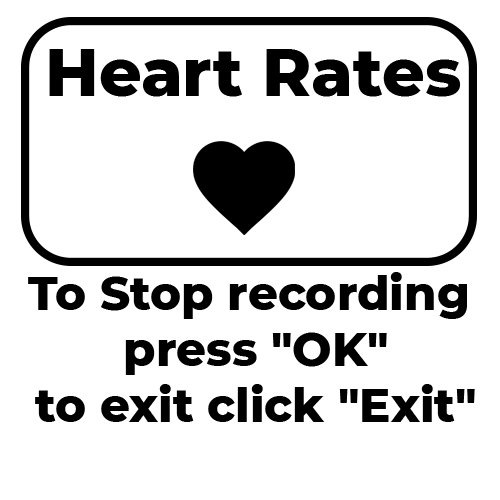
<style>
.page{position:relative;width:500px;height:500px;background:#ffffff}
.page>*{position:absolute;margin:0}
.t1{font:66.7px "Montserrat-ExtraBold";color:#000000}
.t2{font:46.7px "Montserrat-ExtraBold";color:#000000}
</style>
<div class="page">
<p class="t1" style="left:49px;top:49px;width:412px;height:48px">Heart Rates</p>
<p class="t2" style="left:28px;top:272px;width:447px;height:150px;text-align:center">To Stop recording<br> press "OK"<br> to exit click "Exit"</p>
</div>
